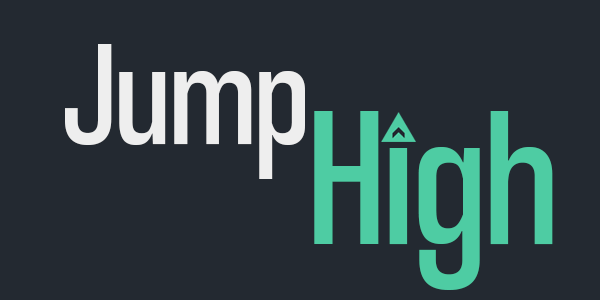
<style>
.page{position:relative;width:600px;height:300px;background:#232931}
.page>*{position:absolute;margin:0}
.t1{font:150px "CoolveticaCondensedRg-Regular";color:#eeeeee}
.t2{font:200px "CoolveticaCondensedRg-Regular";color:#4ecca3}
</style>
<div class="page">
<p class="t1" style="left:65px;top:44px;width:240px;height:135px">Jump</p>
<p class="t2" style="left:314px;top:111px;width:239px;height:179px">High</p>
</div>
